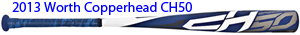
<style>
.page{position:relative;width:300px;height:35px;background:#ffffff}
.page>*{position:absolute;margin:0}
.t1{font:14px "MyriadPro-Regular";color:#0000ff}
</style>
<div class="page">
<p class="t1" style="left:12px;top:2px;width:180px;height:13px">2013 Worth Copperhead CH50</p>
</div>
